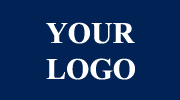
<style>
.page{position:relative;width:180px;height:100px;background:#002254}
.page>*{position:absolute;margin:0}
.t1{font:30px "TimesNewRomanPS-BoldMT";color:#ffffff}
</style>
<div class="page">
<p class="t1" style="left:46px;top:22px;width:89px;height:58px">YOUR <br>LOGO</p>
</div>
